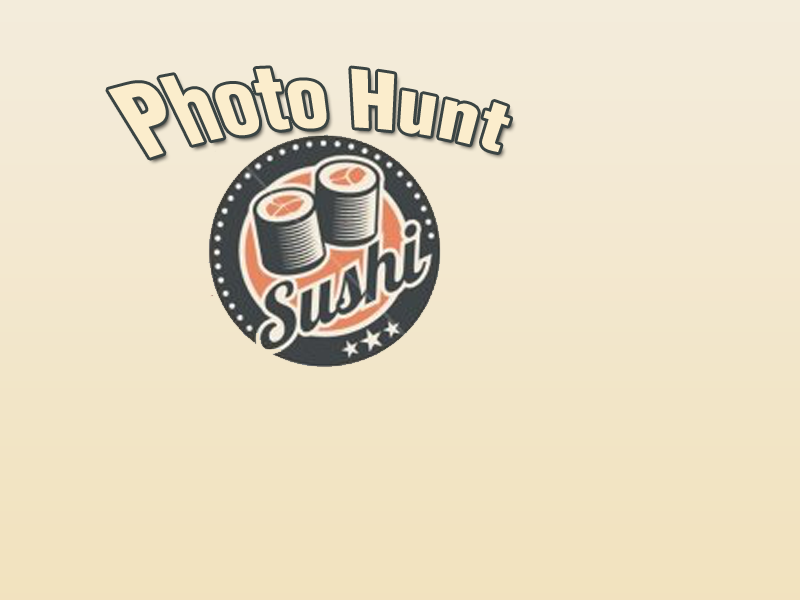
<style>
.page{position:relative;width:800px;height:600px}
.page>*{position:absolute;margin:0}
.t1{font:72px "Helvetica-Condensed-Black";color:#fbedcc}
</style>
<div class="page">
<p class="t1" style="left:108px;top:68px;width:403px;height:90px">Photo Hunt</p>
</div>
